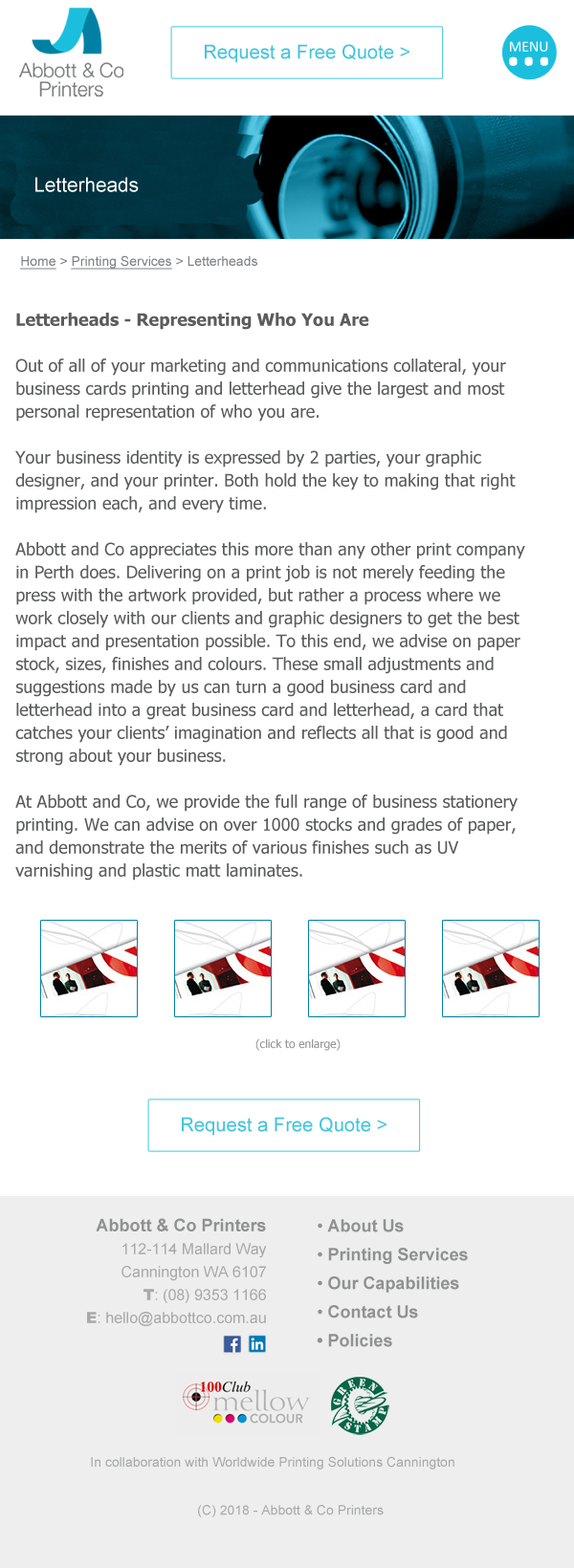
<style>
.page{position:relative;width:574px;height:1568px;background:#ffffff}
.page>*{position:absolute;margin:0}
.t1{font:15.2px "Calibri";color:#ffffff}
.t2{font:19.3px "ArialMT";color:#41c4dc}
.t3{font:76.1px "Calibri";letter-spacing:-0.05em;color:#ffffff}
.t4{font:19.9px "ArialMT";color:#ffffff}
.t5{font:13.4px "ArialMT";color:#7f8184;text-decoration:underline}
.t6{font:13.4px "ArialMT";color:#7f8184}
.t7{font:17.2px/22.9px "Tahoma";color:#5b5c5c}
.t8{font:17.2px/22.9px "Tahoma-Bold";color:#5b5c5c}
.t9{font:11.5px "Tahoma";color:#969797}
.t10{font:15.3px/22.9px "ArialMT";color:#a8a9a9}
.t11{font:17.2px/22.9px "Arial-BoldMT";color:#909191}
.t12{font:15.3px/22.9px "Arial-Black";color:#a8a9a9}
.t13{font:17.2px/28.7px "Arial-BoldMT";color:#909191}
.t14{font:17.2px/28.7px "ArialMT";color:#909191}
.t15{font:13.4px "ArialMT";color:#a8a9a9}
</style>
<div class="page">
<p class="t1" style="left:510px;top:41px;width:38px;height:11px">MENU</p>
<p class="t2" style="left:205px;top:44px;width:204px;height:19px">Request a Free Quote &gt;</p>
<p class="t3" style="left:509px;top:56px;width:39px;height:10px">...</p>
<p class="t4" style="left:35px;top:177px;width:104px;height:15px">Letterheads</p>
<p class="t5" style="left:20px;top:255px;width:237px;height:15px">Home<span class="t6"> &gt; </span>Printing Services<span class="t6"> &gt; Letterheads</span></p>
<p class="t7" style="left:15px;top:313px;width:510px;height:568px"><span class="t8">Letterheads - Representing Who You Are<br><br></span>Out of all of your marketing and communications collateral, your business cards printing and letterhead give the largest and most personal representation of who you are.<br><br>Your business identity is expressed by 2 parties, your graphic designer, and your printer. Both hold the key to making that right impression each, and every time.<br><br>Abbott and Co appreciates this more than any other print company in Perth does. Delivering on a print job is not merely feeding the press with the artwork provided, but rather a process where we work closely with our clients and graphic designers to get the best impact and presentation possible. To this end, we advise on paper stock, sizes, finishes and colours. These small adjustments and suggestions made by us can turn a good business card and letterhead into a great business card and letterhead, a card that catches your clients’ imagination and reflects all that is good and strong about your business.<br><br>At Abbott and Co, we provide the full range of business stationery printing. We can advise on over 1000 stocks and grades of paper, and demonstrate the merits of various finishes such as UV varnishing and plastic matt laminates.</p>
<p class="t9" style="left:255px;top:1039px;width:85px;height:12px">(click to enlarge)</p>
<p class="t2" style="left:182px;top:1117px;width:204px;height:19px">Request a Free Quote &gt;</p>
<p class="t10" style="left:87px;top:1218px;width:180px;height:108px;text-align:right"><span class="t11">Abbott &amp; Co Printers<br></span>112-114 Mallard Way<br>Cannington WA 6107<br><span class="t12">T</span>: (08) 9353 1166<br><span class="t12">E</span>: hello@abbottco.com.au</p>
<p class="t13" style="left:316px;top:1219px;width:152px;height:128px"><span class="t14">• </span>About Us<br><span class="t14">• </span>Printing Services<br><span class="t14">• </span>Our Capabilities<br><span class="t14">• </span>Contact Us<br>• Policies</p>
<p class="t15" style="left:91px;top:1456px;width:363px;height:14px">In collaboration with Worldwide Printing Solutions Cannington</p>
<p class="t15" style="left:198px;top:1505px;width:185px;height:12px">(C) 2018 - Abbott &amp; Co Printers</p>
</div>
